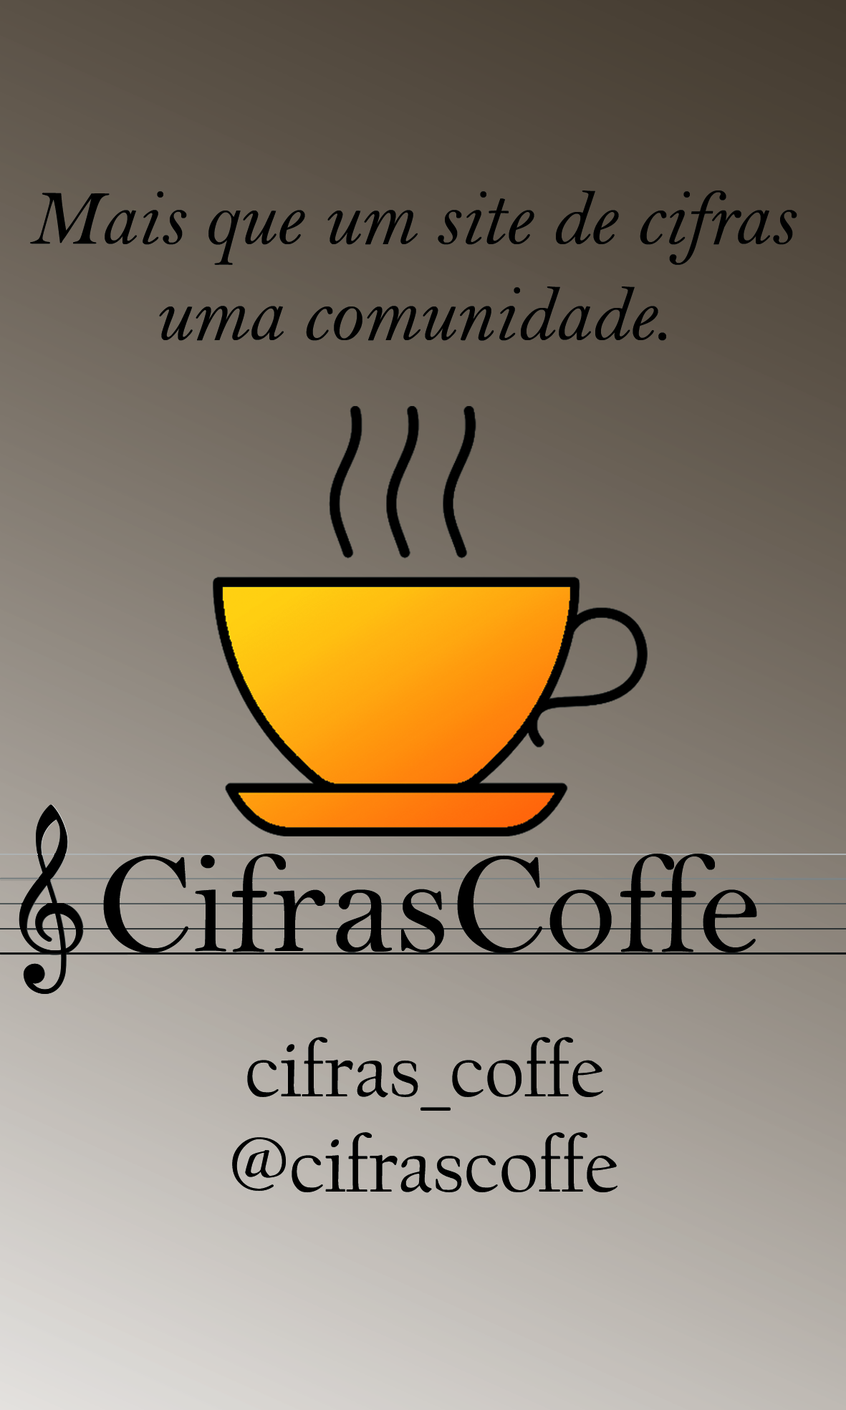
<style>
.page{position:relative;width:846px;height:1410px}
.page>*{position:absolute;margin:0}
.t1{font:79.6px "BellMTItalic";color:#000000}
.t2{font:145.9px "BellMT";color:#000000}
.t3{font:79.6px "CalifornianFB-Reg";color:#000000}
</style>
<div class="page">
<p class="t1" style="left:30px;top:190px;width:767px;height:151px;text-align:center">Mais que um site de cifras<br>uma comunidade.</p>
<p class="t2" style="left:103px;top:854px;width:654px;height:99px">CifrasCoffe</p>
<p class="t3" style="left:232px;top:1037px;width:385px;height:156px;text-align:center">cifras_coffe<br>@cifrascoffe</p>
</div>
